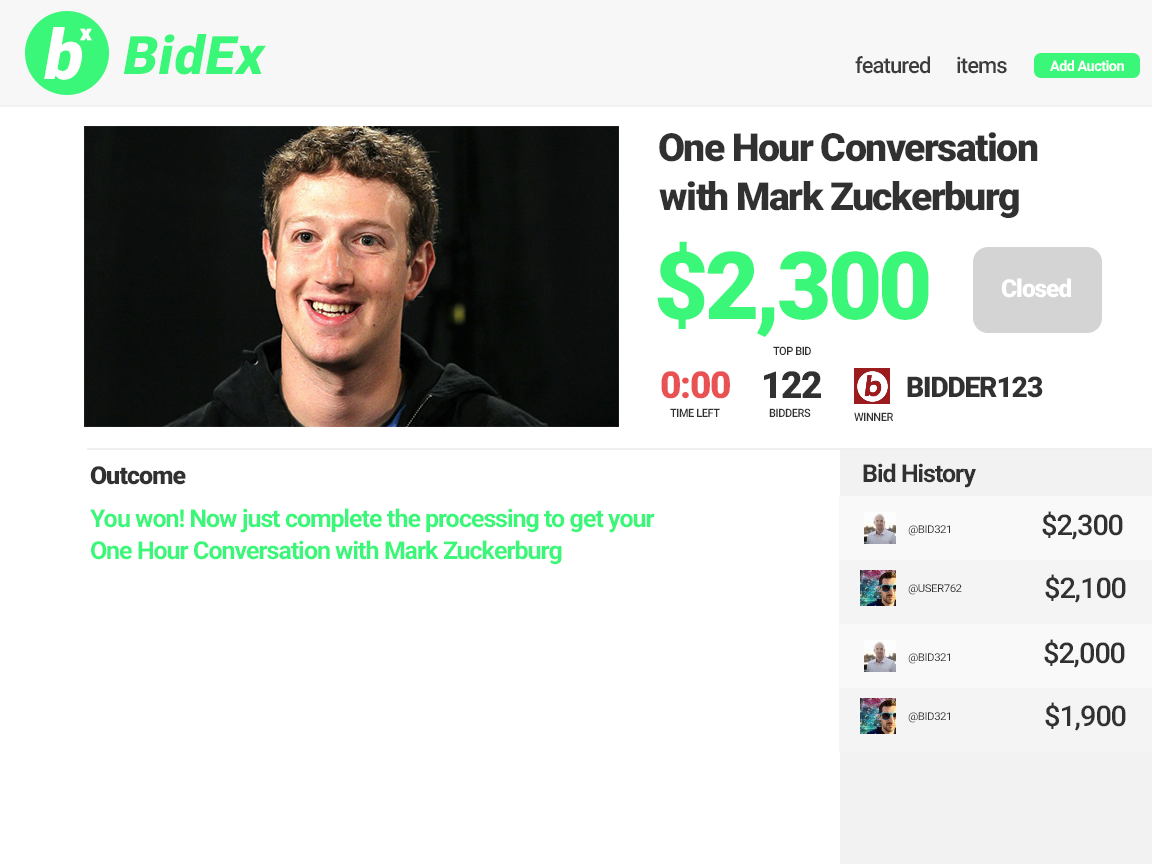
<style>
.page{position:relative;width:1152px;height:864px;background:#ffffff}
.page>*{position:absolute;margin:0}
.t1{font:69.3px "Roboto-Black";letter-spacing:-0.06em;color:#ffffff;font-style:italic}
.t2{font:21.3px "Roboto-Black";letter-spacing:-0.06em;color:#ffffff;font-weight:bold}
.t3{font:53.3px "Roboto-Black";letter-spacing:0.02em;color:#3bf779;font-style:italic}
.t4{font:22.2px "Roboto-Medium";letter-spacing:-0.04em;color:#3c3c3c}
.t5{font:14.4px "Roboto-Bold";letter-spacing:-0.04em;color:#ffffff}
.t6{font:38.8px "Roboto-Black";letter-spacing:-0.04em;color:#313131}
.t7{font:94.1px "Roboto-Black";letter-spacing:-0.04em;color:#3bf779}
.t8{font:24.9px "Roboto-Black";letter-spacing:-0.04em;color:#ffffff}
.t9{font:11.5px "Roboto-Medium";letter-spacing:-0.04em;color:#313131;scale:0.95 1}
.t10{font:37.3px "Roboto-Black";letter-spacing:-0.04em;color:#e95252}
.t11{font:37.3px "Roboto-Black";letter-spacing:-0.04em;color:#313131}
.t12{font:28.4px "Roboto-Black";letter-spacing:-0.04em;color:#313131}
.t13{font:24.9px "Roboto-Black";letter-spacing:-0.04em;color:#313131}
.t14{font:24.9px "Roboto-Bold";letter-spacing:-0.04em;color:#313131}
.t15{font:24.9px "Roboto-Bold";letter-spacing:-0.04em;color:#3bf779}
.t16{font:28.4px "Roboto-Medium";letter-spacing:-0.04em;color:#313131}
.t17{font:10.7px "Roboto-Regular";letter-spacing:-0.04em;color:#313131;scale:1.07 1}
</style>
<div class="page">
<p class="t1" style="left:44px;top:27px;width:38px;height:53px">b</p>
<p class="t2" style="left:80px;top:28px;width:12px;height:13px">x</p>
<p class="t3" style="left:124px;top:34px;width:142px;height:41px">BidEx</p>
<p class="t4" style="left:855px;top:56px;width:75px;height:18px">featured</p>
<p class="t4" style="left:957px;top:56px;width:50px;height:18px">items</p>
<p class="t5" style="left:1050px;top:60px;width:74px;height:12px">Add Auction</p>
<p class="t6" style="left:659px;top:132px;width:379px;height:30px">One Hour Conversation</p>
<p class="t6" style="left:659px;top:181px;width:360px;height:37px">with Mark Zuckerburg</p>
<p class="t7" style="left:657px;top:241px;width:272px;height:96px">$2,300</p>
<p class="t8" style="left:1001px;top:278px;width:70px;height:20px">Closed</p>
<p class="t9" style="left:773px;top:346px;width:38px;height:9px">TOP BID</p>
<p class="t10" style="left:661px;top:371px;width:69px;height:28px">0:00</p>
<p class="t11" style="left:764px;top:371px;width:57px;height:27px">122</p>
<p class="t12" style="left:907px;top:376px;width:136px;height:22px">BIDDER123</p>
<p class="t9" style="left:670px;top:408px;width:50px;height:9px">TIME LEFT</p>
<p class="t9" style="left:769px;top:408px;width:42px;height:9px">BIDDERS</p>
<p class="t9" style="left:854px;top:412px;width:40px;height:9px">WINNER</p>
<p class="t13" style="left:90px;top:466px;width:96px;height:19px">Outcome</p>
<p class="t14" style="left:863px;top:463px;width:113px;height:25px">Bid History</p>
<p class="t15" style="left:90px;top:508px;width:565px;height:25px">You won! Now just complete the processing to get your</p>
<p class="t16" style="left:1042px;top:511px;width:81px;height:29px">$2,300</p>
<p class="t17" style="left:908px;top:525px;width:42px;height:11px">@BIvD321</p>
<p class="t15" style="left:91px;top:540px;width:471px;height:25px">One Hour Conversation with Mark Zuckerburg</p>
<p class="t16" style="left:1045px;top:574px;width:81px;height:29px">$2,100</p>
<p class="t17" style="left:908px;top:584px;width:54px;height:11px">@USERvbvvvvvvvvvcwu762</p>
<p class="t16" style="left:1044px;top:639px;width:81px;height:29px">$2,000</p>
<p class="t17" style="left:908px;top:653px;width:42px;height:11px">@BIvD321</p>
<p class="t16" style="left:1045px;top:702px;width:81px;height:29px">$1,900</p>
<p class="t17" style="left:908px;top:712px;width:42px;height:11px">@BIvD321</p>
</div>
